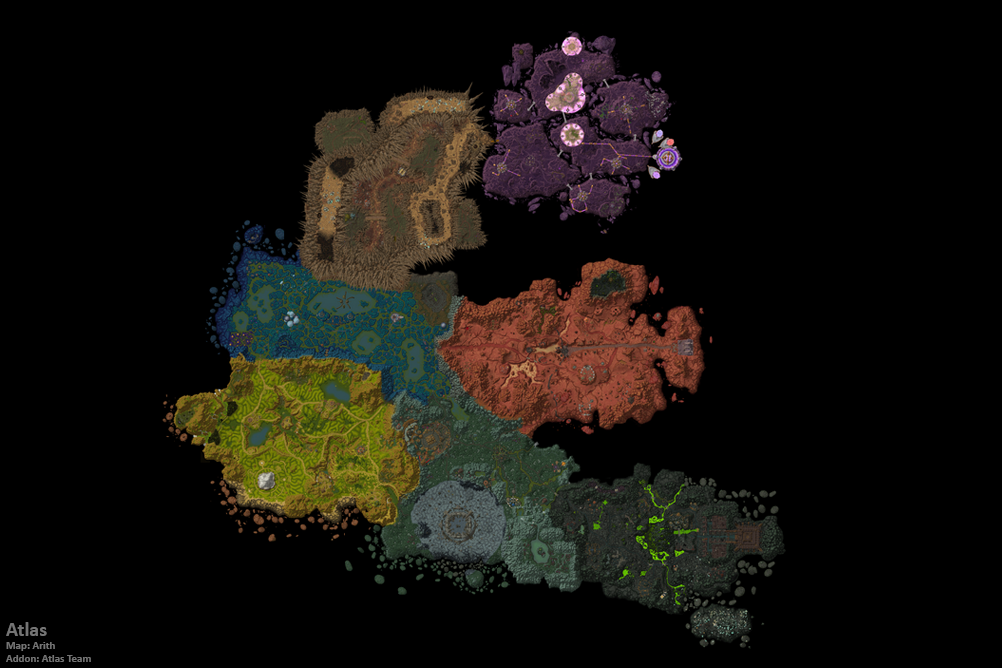
<style>
.page{position:relative;width:1002px;height:668px;background:#000000}
.page>*{position:absolute;margin:0}
.t1{font:11px "Calibri-Bold";color:#747474}
.t2{font:20px "Calibri-Bold";color:#747474}
</style>
<div class="page">
<p class="t1" style="left:6px;top:622px;width:85px;height:40px"><span class="t2">Atlas<br></span>Map: Arith<br>Addon: Atlas Team</p>
</div>
